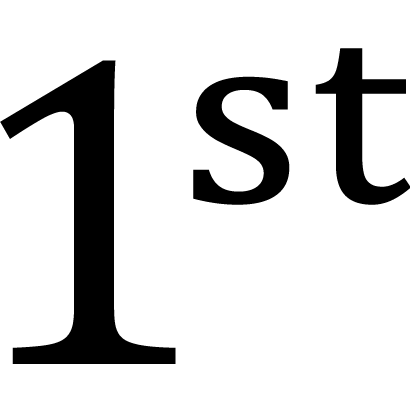
<style>
.page{position:relative;width:410px;height:410px;background:#ffffff}
.page>*{position:absolute;margin:0}
.t1{font:400px "Cambria";color:#000000}
.t2{font:450px "Cambria";color:#000000}
</style>
<div class="page">
<p class="t1" style="left:0px;top:48px;width:411px;height:316px"><span class="t2">1</span>st</p>
</div>
